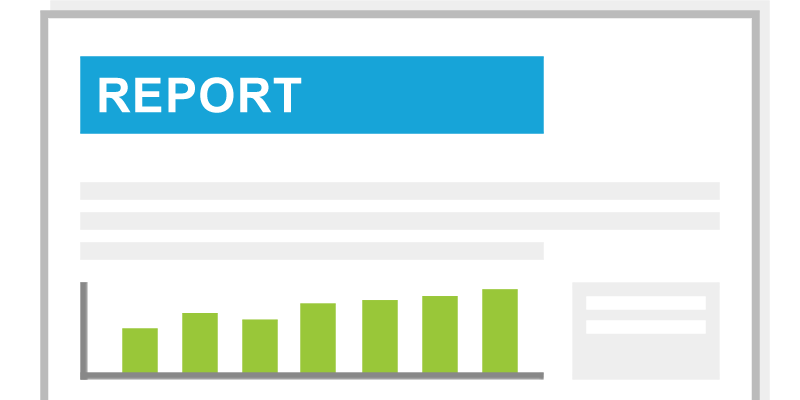
<style>
.page{position:relative;width:800px;height:400px;background:#ffffff}
.page>*{position:absolute;margin:0}
.t1{font:48px "Arial-BoldMT";letter-spacing:0.025em;color:#ffffff;text-transform:uppercase}
</style>
<div class="page">
<p class="t1" style="left:99px;top:77px;width:203px;height:36px">REPORT</p>
</div>
